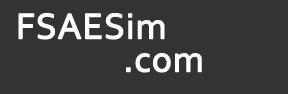
<style>
.page{position:relative;width:288px;height:94px;background:#333333}
.page>*{position:absolute;margin:0}
.t1{font:37.5px "Corbel";color:#ffffff;font-weight:bold}
</style>
<div class="page">
<p class="t1" style="left:18px;top:13px;width:147px;height:27px">FSAESim</p>
<p class="t1" style="left:126px;top:53px;width:76px;height:20px">.com</p>
</div>
